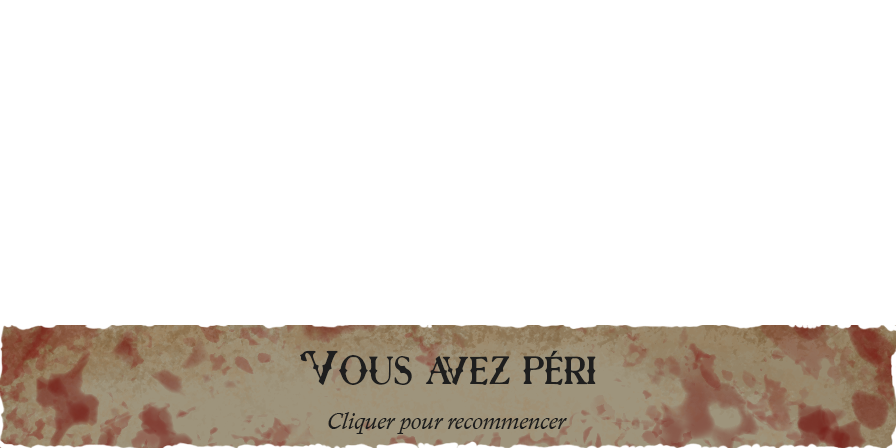
<style>
.page{position:relative;width:896px;height:448px;background:#ffffff}
.page>*{position:absolute;margin:0}
.t1{font:47.6px "RoseKnight-Regular";color:#1e1e1e}
.t2{font:24px "CalistoMT-Italic";color:#1c1c1c}
</style>
<div class="page">
<p class="t1" style="left:300px;top:350px;width:296px;height:35px">Vous avez péri</p>
<p class="t2" style="left:328px;top:412px;width:239px;height:22px">Cliquer pour recommencer</p>
</div>
